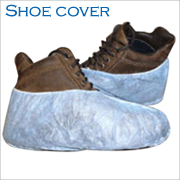
<style>
.page{position:relative;width:180px;height:180px;background:#ffffff}
.page>*{position:absolute;margin:0}
.t1{font:16.7px "CopperplateGothic-Light";color:#0a65b1}
</style>
<div class="page">
<p class="t1" style="left:5px;top:4px;width:105px;height:13px">Shoe cover</p>
</div>
